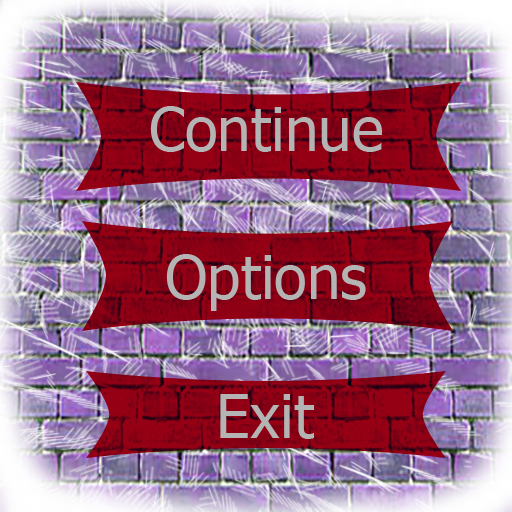
<style>
.page{position:relative;width:512px;height:512px}
.page>*{position:absolute;margin:0}
.t1{font:60px "Tahoma";color:#b4b4b4}
</style>
<div class="page">
<p class="t1" style="left:150px;top:106px;width:232px;height:46px">Continue</p>
<p class="t1" style="left:166px;top:254px;width:200px;height:57px">Options</p>
<p class="t1" style="left:220px;top:394px;width:94px;height:45px">Exit</p>
</div>
